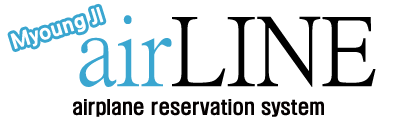
<style>
.page{position:relative;width:397px;height:129px;background:#ffffff}
.page>*{position:absolute;margin:0}
.t1{font:96px "PMingLiU-ExtB";color:#000000}
.t2{font:96px "PMingLiU-ExtB";color:#3aa6d0}
.t3{font:18.7px "H2hdrM";color:#040000}
</style>
<div class="page">
<p class="t1" style="left:79px;top:15px;width:297px;height:72px"><span class="t2">air</span>LINE</p>
<p class="t3" style="left:73px;top:99px;width:251px;height:18px">airplane reservation system</p>
</div>
